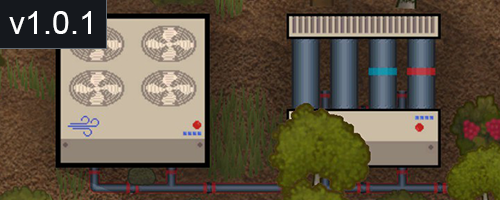
<style>
.page{position:relative;width:500px;height:200px}
.page>*{position:absolute;margin:0}
.t1{font:32.1px "ArialMT";color:#ffffff}
</style>
<div class="page">
<p class="t1" style="left:9px;top:11px;width:82px;height:23px">v1.0.1</p>
</div>
